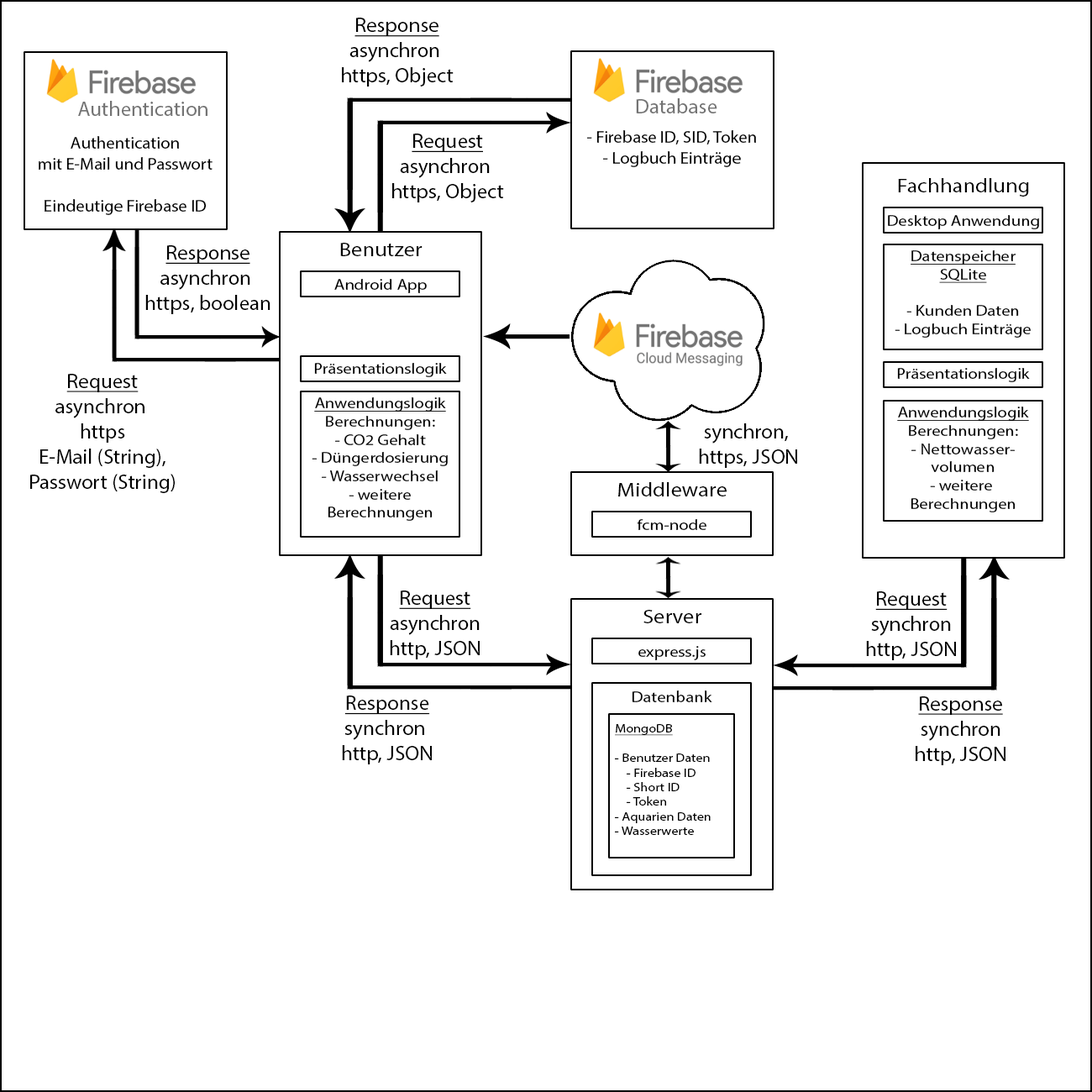
<style>
.page{position:relative;width:1092px;height:1092px;background:#ffffff}
.page>*{position:absolute;margin:0}
.t1{font:21px "MyriadPro-Regular";color:#000000}
.t2{font:21px "MyriadPro-Regular";color:#000000;text-decoration:underline}
.t3{font:21px "MyriadPro-Regular";color:#747474}
.t4{font:17.5px "MyriadPro-Regular";color:#000000}
.t5{font:19.6px "MyriadPro-Regular";color:#000000;scale:1.13 1}
.t6{font:15.3px "MyriadPro-Regular";color:#000000;scale:1.13 1}
.t7{font:15.2px "MyriadPro-Regular";color:#000000;scale:1.14 1}
.t8{font:15.2px "MyriadPro-Regular";color:#000000;text-decoration:underline;scale:1.14 1}
.t9{font:15.4px "MyriadPro-Regular";color:#000000;scale:1.13 1}
.t10{font:15.7px "MyriadPro-Regular";color:#000000;scale:1.12 1}
.t11{font:12.2px "MyriadPro-Regular";color:#000000;scale:1.12 1}
.t12{font:12.2px "MyriadPro-Regular";color:#000000;text-decoration:underline;scale:1.12 1}
</style>
<div class="page">
<p class="t1" style="left:342px;top:18px;width:112px;height:69px;text-align:center"><span class="t2">Response<br></span>asynchron <br>https, Object</p>
<p class="t3" style="left:78px;top:101px;width:129px;height:15px">Authentication</p>
<p class="t3" style="left:636px;top:98px;width:81px;height:15px">Database</p>
<p class="t4" style="left:39px;top:136px;width:174px;height:79px;text-align:center">Authentication<br>mit E-Mail und Passwort<br><br>Eindeutige Firebase ID</p>
<p class="t1" style="left:392px;top:134px;width:112px;height:68px;text-align:center"><span class="t2">Request<br></span>asynchron <br>https, Object</p>
<p class="t4" style="left:587px;top:130px;width:169px;height:37px;text-align:center">- Firebase ID, SID, Token<br>- Logbuch Einträge</p>
<p class="t5" style="left:898px;top:178px;width:131px;height:19px">Fachhandlung</p>
<p class="t6" style="left:888px;top:215px;width:151px;height:14px">Desktop Anwendung</p>
<p class="t1" style="left:145px;top:245px;width:125px;height:69px;text-align:center"><span class="t2">Response<br></span>asynchron <br>https, boolean</p>
<p class="t5" style="left:340px;top:243px;width:83px;height:13px">Benutzer</p>
<p class="t7" style="left:895px;top:250px;width:136px;height:88px;text-align:center"><span class="t8">Datenspeicher<br>SQLite<br><br></span>- Kunden Daten<br>- Logbuch Einträge</p>
<p class="t6" style="left:334px;top:279px;width:93px;height:14px">Android App</p>
<p class="t9" style="left:314px;top:363px;width:133px;height:14px">Präsentationslogik</p>
<p class="t1" style="left:30px;top:374px;width:145px;height:119px;text-align:center"><span class="t2">Request<br></span>asynchron <br>https<br>E-Mail (String),<br>Passwort (String)</p>
<p class="t7" style="left:897px;top:368px;width:133px;height:14px">Präsentationslogik</p>
<p class="t7" style="left:312px;top:397px;width:136px;height:124px;text-align:center"><span class="t8">Anwendungslogik<br></span>Berechnungen:<br>- CO2 Gehalt<br>- Düngerdosierung<br>- Wasserwechsel<br>- weitere<br>Berechnungen</p>
<p class="t7" style="left:897px;top:407px;width:132px;height:105px;text-align:center"><span class="t8">Anwendungslogik<br></span>Berechnungen:<br>- Nettowasser-<br>volumen<br>- weitere <br>Berechnungen</p>
<p class="t1" style="left:699px;top:423px;width:98px;height:45px;text-align:center">synchron, <br>https, JSON</p>
<p class="t5" style="left:618px;top:482px;width:109px;height:14px">Middleware</p>
<p class="t6" style="left:637px;top:519px;width:69px;height:11px">fcm-node</p>
<p class="t1" style="left:390px;top:591px;width:90px;height:68px;text-align:center"><span class="t2">Request<br></span>asynchron<br>http, JSON</p>
<p class="t1" style="left:866px;top:591px;width:90px;height:69px;text-align:center"><span class="t2">Request<br></span>synchron<br>http, JSON</p>
<p class="t5" style="left:643px;top:610px;width:58px;height:13px">Server</p>
<p class="t6" style="left:638px;top:646px;width:68px;height:14px">express.js</p>
<p class="t1" style="left:342px;top:696px;width:90px;height:68px;text-align:center"><span class="t2">Response<br></span>synchron <br>http, JSON</p>
<p class="t10" style="left:632px;top:690px;width:80px;height:12px">Datenbank</p>
<p class="t1" style="left:916px;top:696px;width:89px;height:69px;text-align:center"><span class="t2">Response<br></span>synchron<br>http, JSON</p>
<p class="t11" style="left:615px;top:724px;width:96px;height:111px"><span class="t12">MongoDB<br><br></span>- Benutzer Daten<br>    - Firebase ID<br>    - Short ID<br>    - Token <br>- Aquarien Daten<br>- Wasserwerte</p>
</div>
